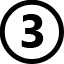
<style>
.page{position:relative;width:64px;height:64px;background:#ffffff}
.page>*{position:absolute;margin:0}
.t1{font:48px "SegoeUI-Bold";color:#000000}
</style>
<div class="page">
<p class="t1" style="left:21px;top:14px;width:23px;height:34px">3</p>
</div>
